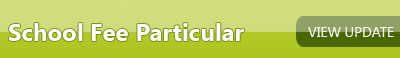
<style>
.page{position:relative;width:400px;height:58px}
.page>*{position:absolute;margin:0}
.t1{font:24px "SegoeUI-Bold";color:#fefefe}
.t2{font:14px "SegoeUI";color:#f6f7f1}
</style>
<div class="page">
<p class="t1" style="left:9px;top:23px;width:235px;height:18px">School Fee Particular</p>
<p class="t2" style="left:308px;top:27px;width:86px;height:10px">VIEW UPDATE</p>
</div>
